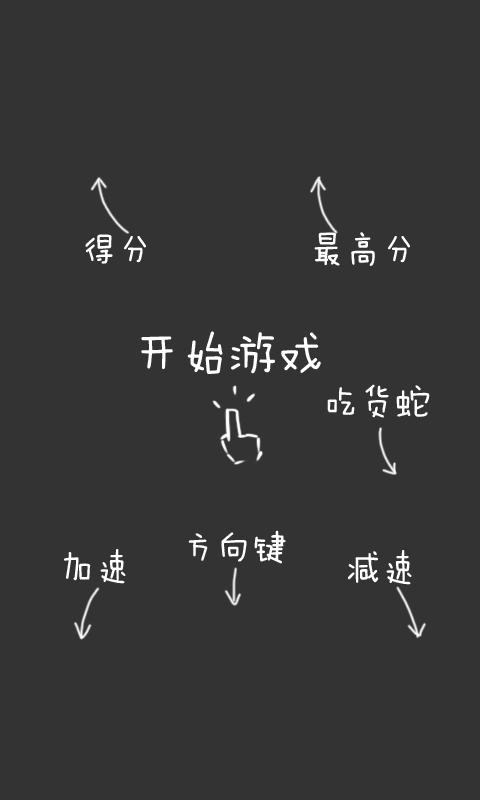
<style>
.page{position:relative;width:480px;height:800px;background:#333333}
.page>*{position:absolute;margin:0}
.t1{font:36px "FZMWJW--GB1-0";color:#ffffff}
.t2{font:48px "FZMWJW--GB1-0";color:#ffffff}
</style>
<div class="page">
<p class="t1" style="left:314px;top:232px;width:96px;height:34px">最高分</p>
<p class="t1" style="left:85px;top:234px;width:61px;height:30px">得分</p>
<p class="t2" style="left:141px;top:331px;width:180px;height:43px">开始游戏</p>
<p class="t1" style="left:327px;top:384px;width:103px;height:34px">吃货蛇</p>
<p class="t1" style="left:188px;top:530px;width:98px;height:34px">方向键</p>
<p class="t1" style="left:64px;top:549px;width:62px;height:35px">加速</p>
<p class="t1" style="left:348px;top:550px;width:64px;height:35px">减速</p>
</div>
